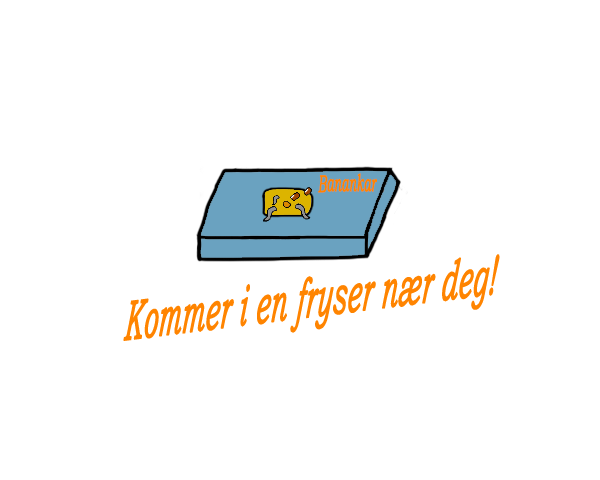
<style>
.page{position:relative;width:600px;height:480px;background:#ffffff}
.page>*{position:absolute;margin:0}
.t1{font:24.5px "BookmanOldStyle-Italic";color:#ff8400;font-weight:bold;scale:0.47 1}
.t2{font:55.6px "BookmanOldStyle-Italic";color:#ff8400;font-weight:bold;font-style:italic;scale:0.47 1}
</style>
<div class="page">
<p class="t1" style="left:318px;top:173px;width:59px;height:20px;rotate:-1deg">Banankar</p>
<p class="t2" style="left:123px;top:254px;width:377px;height:87px;rotate:-7deg">Kommer i en fryser nær deg!</p>
</div>
